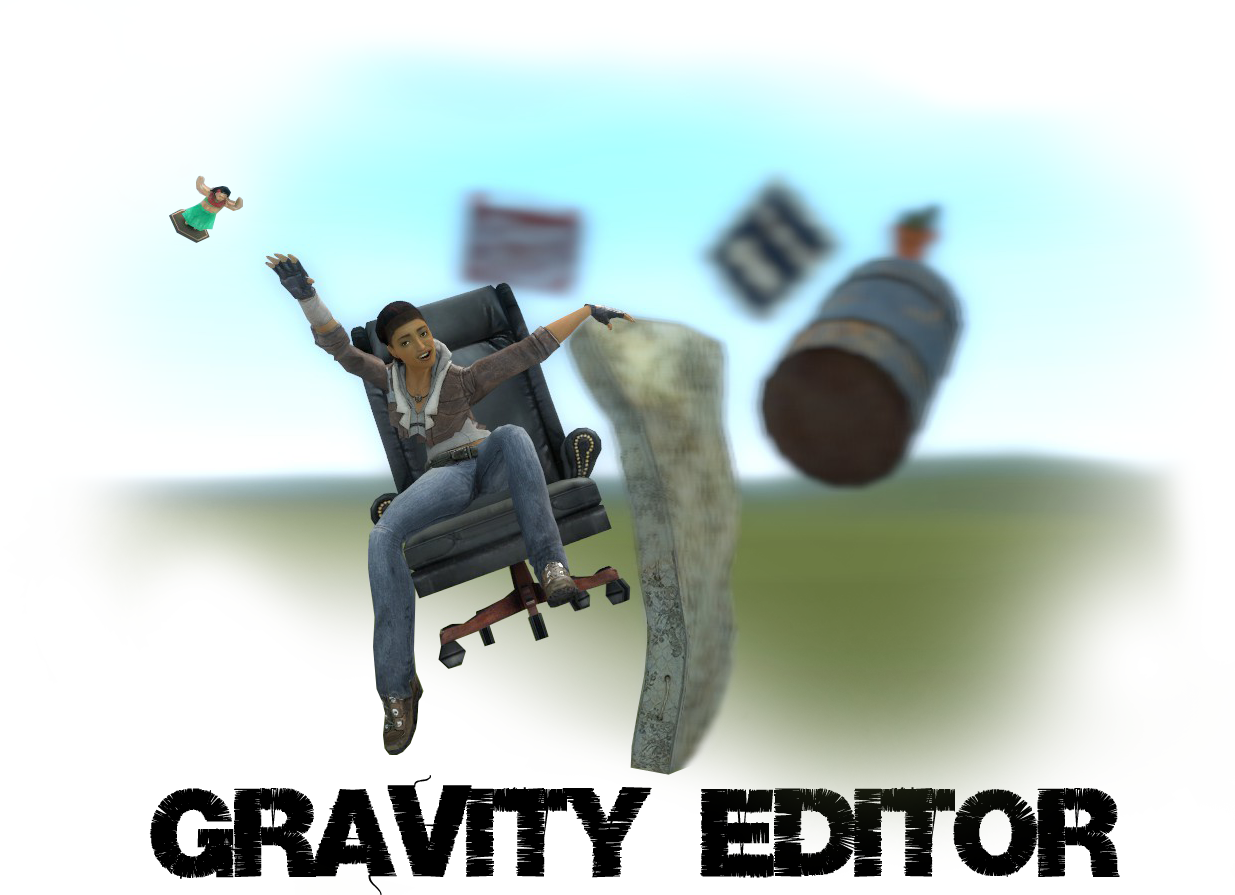
<style>
.page{position:relative;width:1235px;height:895px;background:#ffffff}
.page>*{position:absolute;margin:0}
.t1{font:110.3px "Base05";color:#000000}
</style>
<div class="page">
<p class="t1" style="left:149px;top:775px;width:971px;height:121px">Gravity editor</p>
</div>
